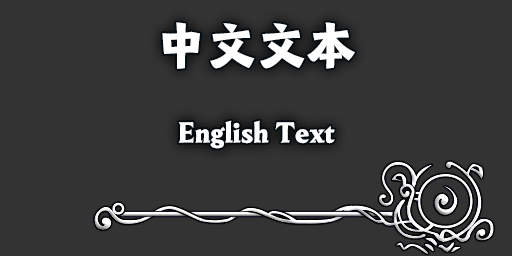
<style>
.page{position:relative;width:512px;height:256px;background:#333333}
.page>*{position:absolute;margin:0}
.t1{font:50px "HYJiangJun-W";color:#ffffff}
.t2{font:28px "HYJiangJun-W";color:#ffffff}
</style>
<div class="page">
<p class="t1" style="left:162px;top:22px;width:193px;height:47px">中文文本</p>
<p class="t2" style="left:178px;top:120px;width:157px;height:29px">English Text</p>
</div>
